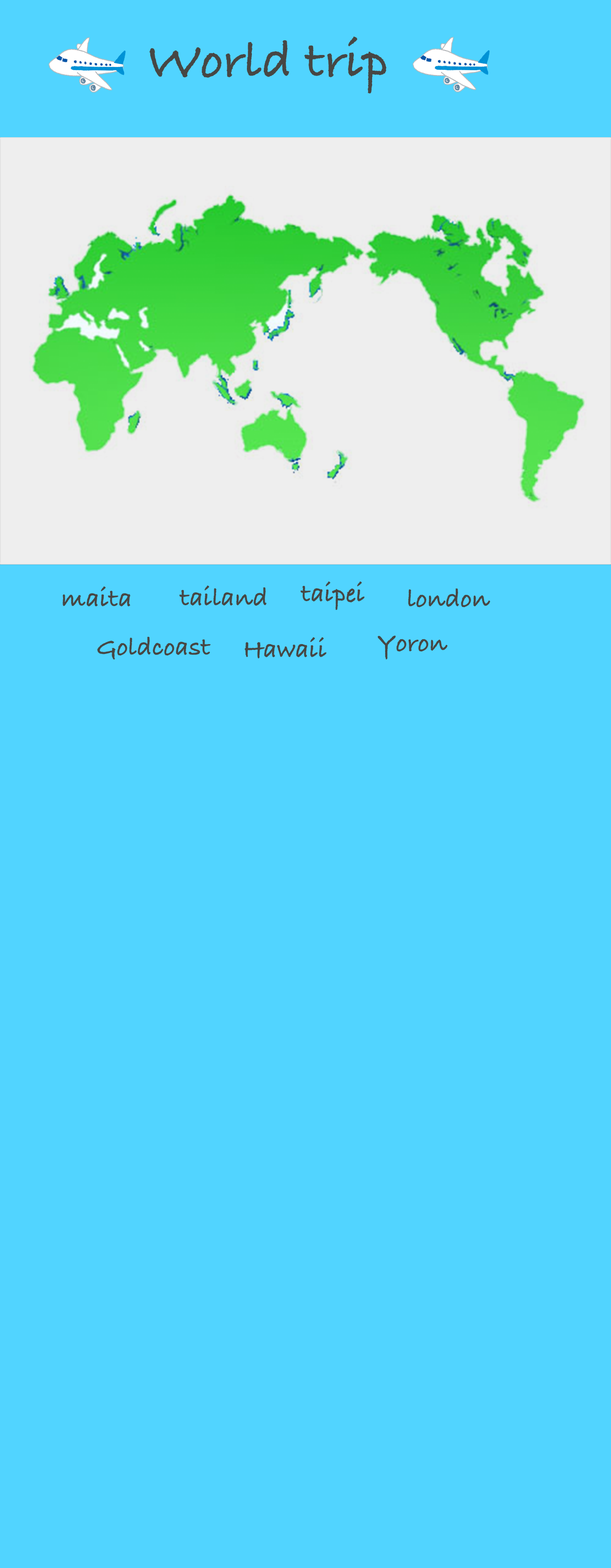
<style>
.page{position:relative;width:611px;height:1568px;background:#51d4ff}
.page>*{position:absolute;margin:0}
.t1{font:53.6px "BradleyHandITCTT-Bold";color:#474744}
.t2{font:26.8px "BradleyHandITCTT-Bold";color:#474744}
</style>
<div class="page">
<p class="t1" style="left:149px;top:36px;width:237px;height:57px">World trip</p>
<p class="t2" style="left:300px;top:581px;width:64px;height:29px">taipei</p>
<p class="t2" style="left:63px;top:586px;width:68px;height:21px">maita</p>
<p class="t2" style="left:179px;top:586px;width:87px;height:20px">tailand</p>
<p class="t2" style="left:408px;top:588px;width:82px;height:19px">london</p>
<p class="t2" style="left:97px;top:636px;width:114px;height:24px">Goldcoast</p>
<p class="t2" style="left:244px;top:637px;width:82px;height:21px">Hawaii</p>
<p class="t2" style="left:377px;top:636px;width:70px;height:24px">Yoron</p>
</div>
